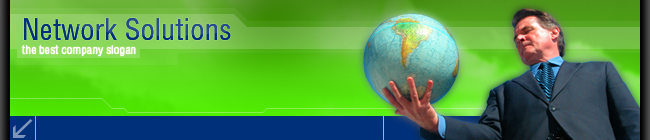
<style>
.page{position:relative;width:650px;height:140px}
.page>*{position:absolute;margin:0}
.t1{font:12px/14px "HeliosCond";color:#ffffff}
.t2{font:30px/14px "HeliosCond";color:#003079}
</style>
<div class="page">
<p class="t1" style="left:22px;top:18px;width:209px;height:38px"><span class="t2">Network Solutions<br></span>the best company slogan</p>
<p class="t1" style="left:22px;top:18px;width:209px;height:38px"><span class="t2">Network Solutions<br></span>the best company slogan</p>
</div>
